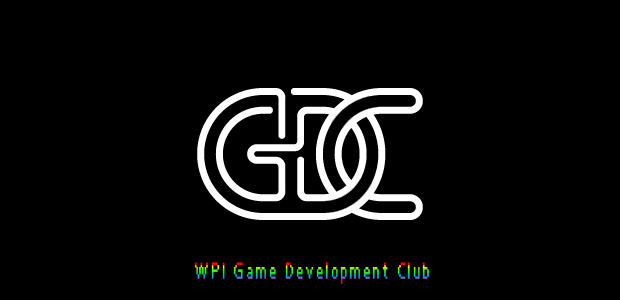
<style>
.page{position:relative;width:620px;height:300px;background:#000000}
.page>*{position:absolute;margin:0}
.t1{font:30px "Photoshop Small";letter-spacing:0.08em}
</style>
<div class="page">
<p class="t1" style="left:194px;top:262px;width:235px;height:22px">WPI Game Development Club</p>
</div>
